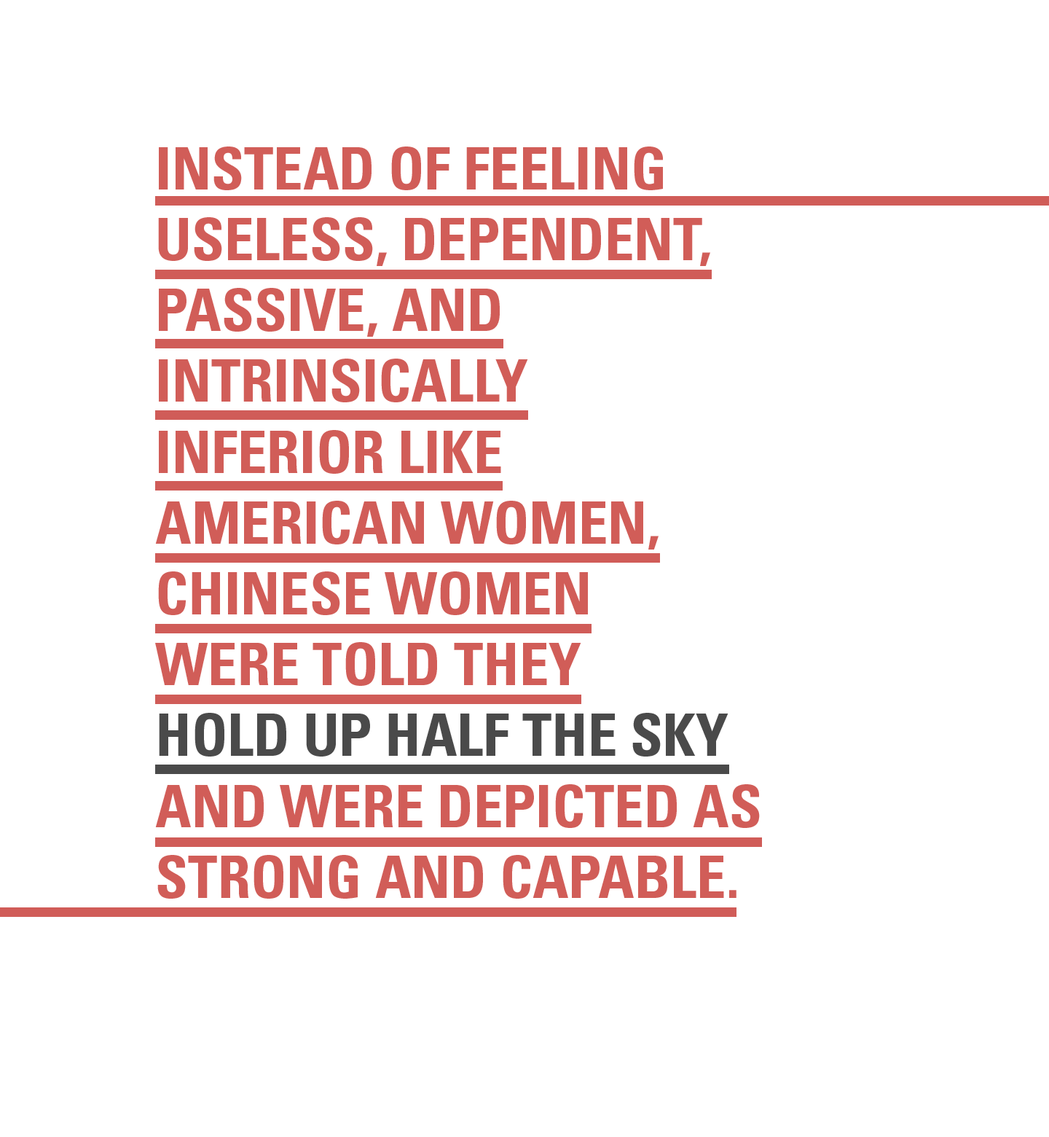
<style>
.page{position:relative;width:1049px;height:1137px;background:#ffffff}
.page>*{position:absolute;margin:0}
.t1{font:59px "Univers-CondensedBold";color:#d15d58}
.t2{font:59px "Univers-CondensedBold";color:#4a4a4a}
</style>
<div class="page">
<p class="t1" style="left:155px;top:146px;width:605px;height:752px">INSTEAD OF FEELING USELESS, DEPENDENT, PASSIVE, AND INTRINSICALLY <br>INFERIOR LIKE <br>AMERICAN WOMEN, CHINESE WOMEN <br>WERE TOLD THEY <br><span class="t2">HOLD UP HALF THE SKY</span> <br>AND WERE DEPICTED AS STRONG AND CAPABLE.</p>
</div>
